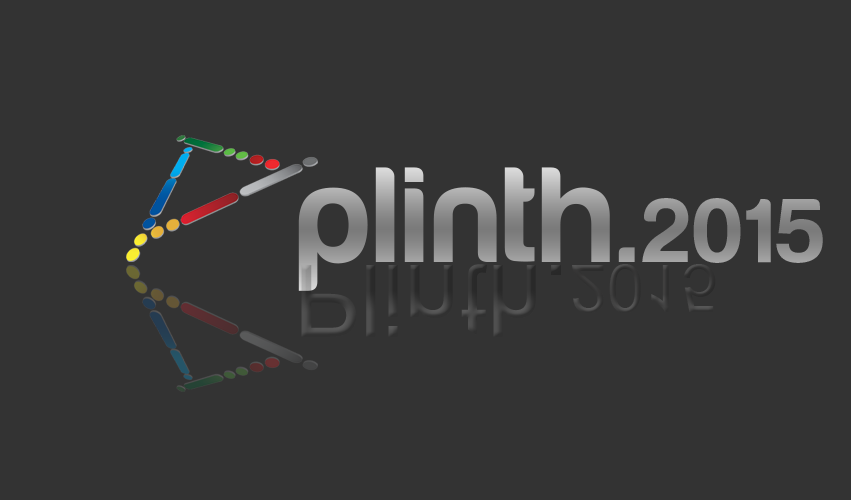
<style>
.page{position:relative;width:851px;height:500px;background:#333333}
.page>*{position:absolute;margin:0}
.t1{font:138.9px "HarabaraMaisBold-HarabaraMaisBold";color:#939393}
.t2{font:92.6px "HarabaraMaisBold-HarabaraMaisBold";color:#939393}
</style>
<div class="page">
<p class="t1" style="left:298px;top:167px;width:525px;height:124px">plinth.<span class="t2">2015</span></p>
</div>
